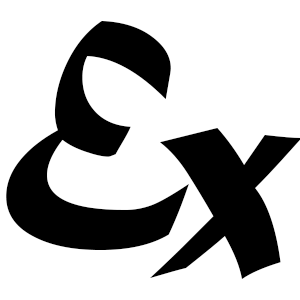
<style>
.page{position:relative;width:300px;height:300px;background:#ffffff}
.page>*{position:absolute;margin:0}
.t1{font:250px "MaturaMTScriptCapitals";color:#000000}
.t2{font:308.3px "MaturaMTScriptCapitals";color:#000000}
</style>
<div class="page">
<p class="t1" style="left:6px;top:21px;width:183px;height:229px">E</p>
<p class="t2" style="left:150px;top:128px;width:151px;height:151px">x</p>
</div>
